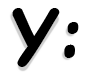
<style>
.page{position:relative;width:91px;height:74px;background:#ffffff}
.page>*{position:absolute;margin:0}
.t1{font:75px "ComicSansMS-BoldItalic";color:#000000}
</style>
<div class="page">
<p class="t1" style="left:12px;top:8px;width:67px;height:59px">Y:</p>
</div>
